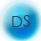
<style>
.page{position:relative;width:41px;height:41px}
.page>*{position:absolute;margin:0}
.t1{font:16px "STHeiti";color:#434343}
</style>
<div class="page">
<p class="t1" style="left:12px;top:15px;width:18px;height:12px">DS</p>
</div>
